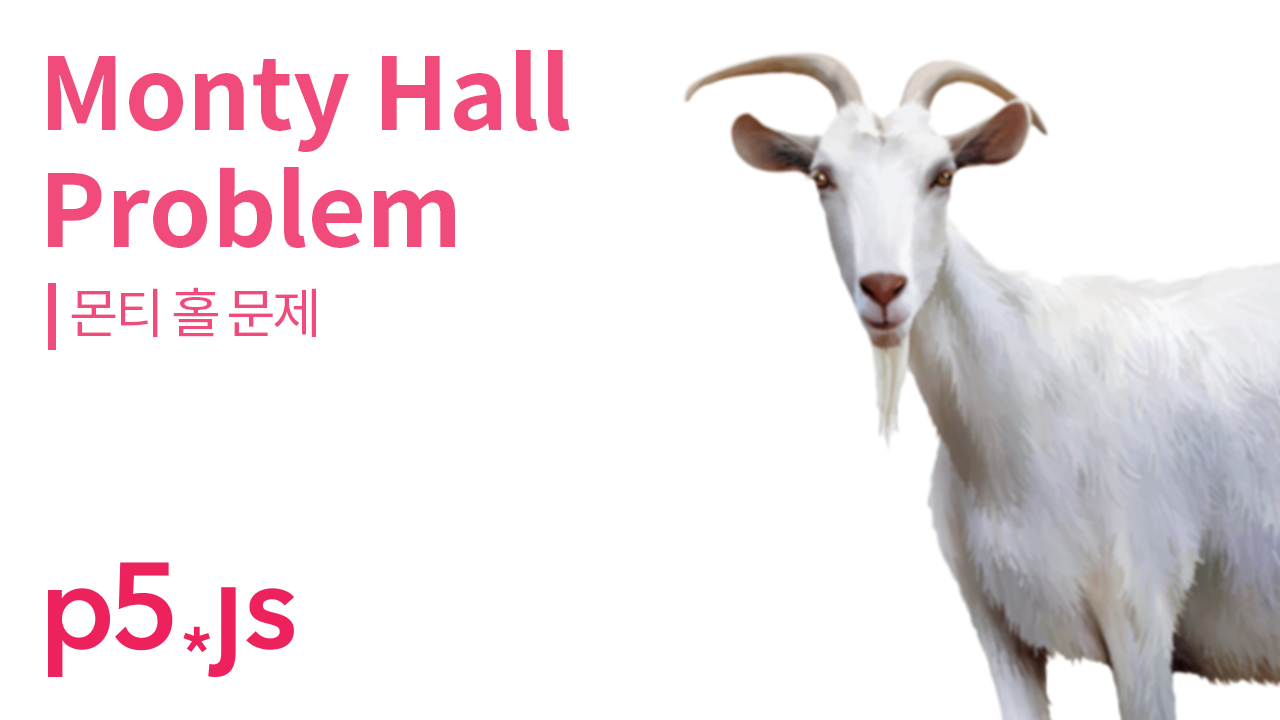
<style>
.page{position:relative;width:1280px;height:720px;background:#ffffff}
.page>*{position:absolute;margin:0}
.t1{font:100px/117px "NotoSansCJKkr-Bold";color:#f14b7b}
.t2{font:54px "NotoSansKR-Regular";letter-spacing:-0.06em;color:#f14b7b}
</style>
<div class="page">
<p class="t1" style="left:48px;top:50px;width:522px;height:198px">Monty Hall<br>Problem</p>
<p class="t2" style="left:71px;top:287px;width:245px;height:50px">몬티 홀 문제</p>
</div>
